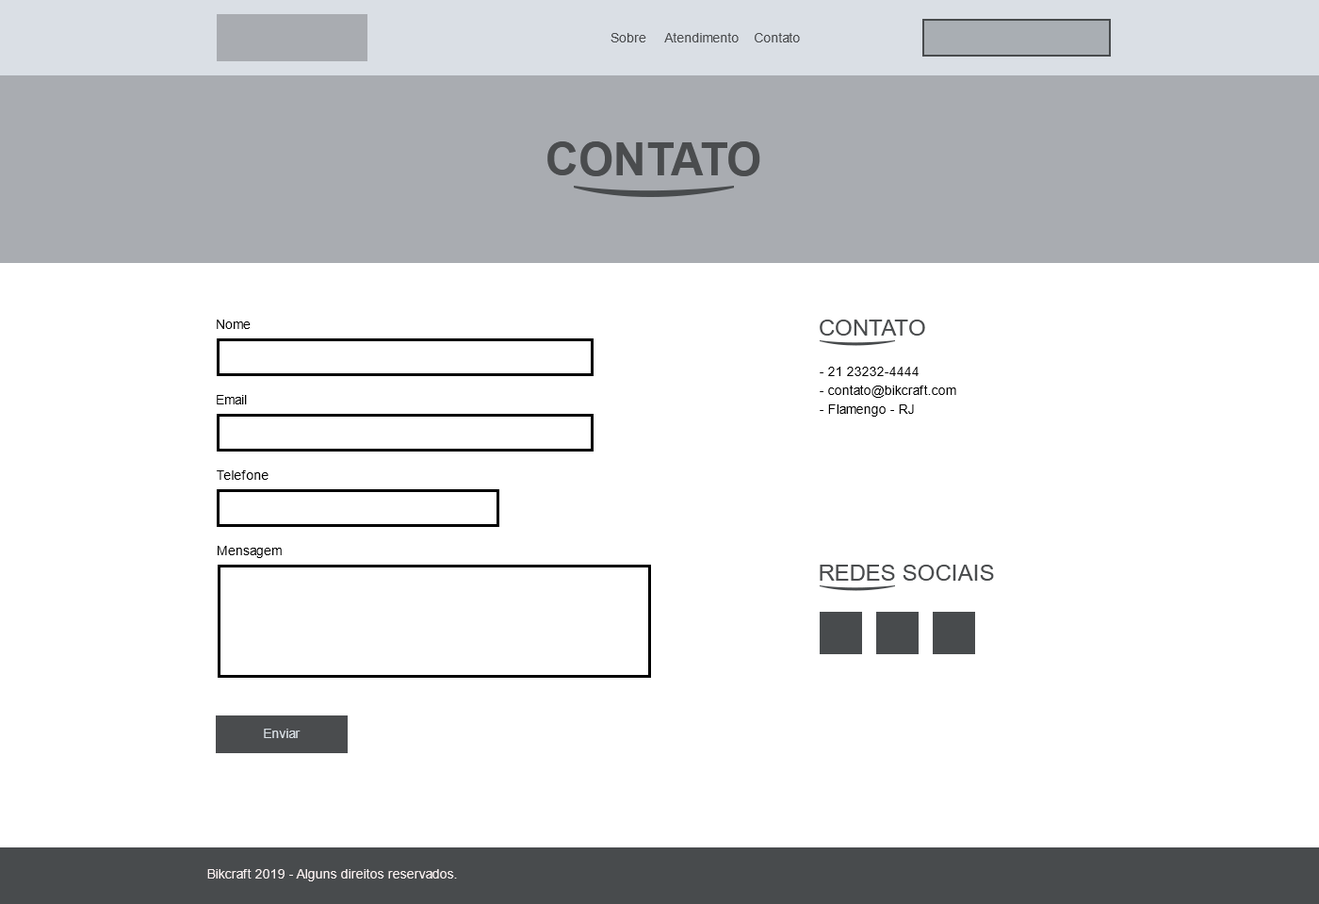
<style>
.page{position:relative;width:1319px;height:904px;background:#ffffff}
.page>*{position:absolute;margin:0}
.t1{font:13.2px "ArialMT";color:#4a4c4e}
.t2{font:45.2px "Arial-BoldMT";color:#4a4c4e;text-transform:uppercase}
.t3{font:13.2px "ArialMT";color:#000000}
.t4{font:22.6px "ArialMT";color:#4a4c4e}
.t5{font:13.2px/18.8px "ArialMT";color:#000000}
.t6{font:13.2px "ArialMT";color:#d9e0e6}
.t7{font:13.2px "ArialMT";color:#f9f0f0}
</style>
<div class="page">
<p class="t1" style="left:611px;top:33px;width:189px;height:9px">Sobre     Atendimento    Contato</p>
<p class="t2" style="left:548px;top:141px;width:213px;height:35px">Contato</p>
<p class="t3" style="left:217px;top:319px;width:34px;height:10px">Nome</p>
<p class="t4" style="left:820px;top:319px;width:105px;height:17px">CONTATO</p>
<p class="t5" style="left:820px;top:367px;width:137px;height:50px">- 21 23232-4444<br>- contato@bikcraft.com<br>- Flamengo - RJ</p>
<p class="t3" style="left:217px;top:395px;width:30px;height:9px">Email</p>
<p class="t3" style="left:217px;top:470px;width:52px;height:10px">Telefone</p>
<p class="t3" style="left:218px;top:546px;width:64px;height:12px">Mensagem</p>
<p class="t4" style="left:820px;top:565px;width:174px;height:16px">REDES SOCIAIS</p>
<p class="t6" style="left:264px;top:728px;width:37px;height:10px">Enviar</p>
<p class="t7" style="left:207px;top:869px;width:250px;height:12px">Bikcraft 2019 - Alguns direitos reservados.</p>
</div>
